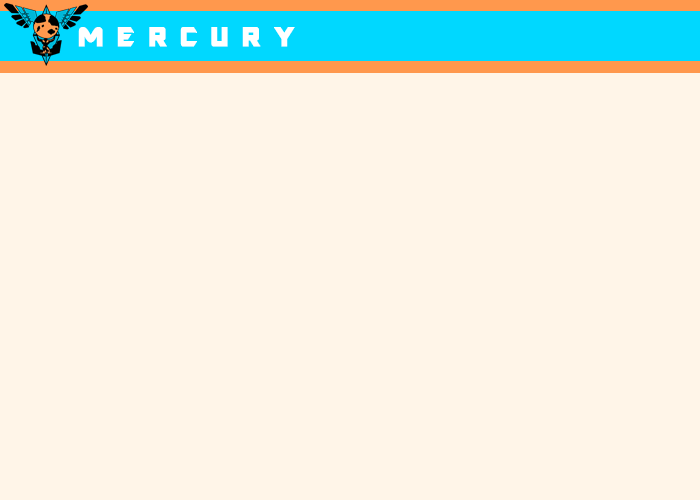
<style>
.page{position:relative;width:700px;height:500px;background:#fff5e8}
.page>*{position:absolute;margin:0}
.t1{font:30px "ARDESTINE";letter-spacing:-0.07em;color:#ffffff;font-weight:bold}
</style>
<div class="page">
<p class="t1" style="left:78px;top:27px;width:217px;height:20px">M E R C U R Y</p>
</div>
